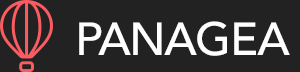
<style>
.page{position:relative;width:300px;height:72px;background:#222222}
.page>*{position:absolute;margin:0}
.t1{font:46px "Avenir-Medium";letter-spacing:-0.025em;color:#ffffff;text-transform:uppercase}
</style>
<div class="page">
<p class="t1" style="left:79px;top:21px;width:211px;height:35px">PANAGEA</p>
</div>
